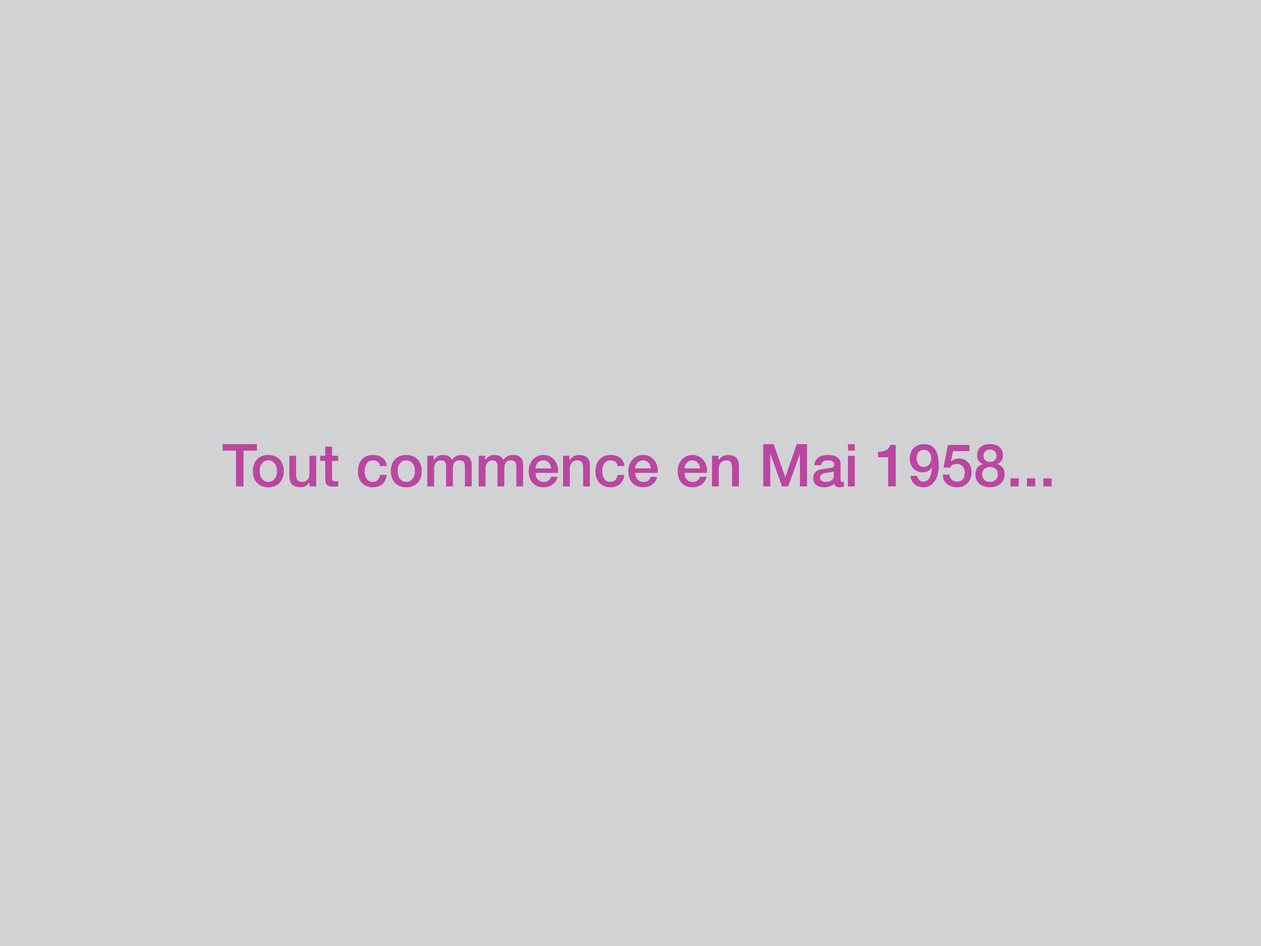
<style>
.page{position:relative;width:1261px;height:946px;background:#d1d2d4}
.page>*{position:absolute;margin:0}
.t1{font:59.1px "HelveticaNeue-Medium";color:#bb46a1}
</style>
<div class="page">
<p class="t1" style="left:223px;top:444px;width:829px;height:43px">Tout commence en Mai 1958...</p>
</div>
